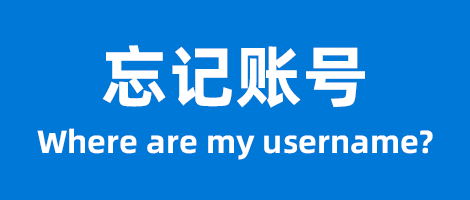
<style>
.page{position:relative;width:470px;height:200px;background:#0078d7}
.page>*{position:absolute;margin:0}
.t1{font:68px "AlibabaPuHuiTi-Bold";color:#ffffff}
.t2{font:32px "AlibabaPuHuiTi-Bold";color:#ffffff}
</style>
<div class="page">
<p class="t1" style="left:102px;top:45px;width:263px;height:63px">忘记账号</p>
<p class="t2" style="left:37px;top:128px;width:396px;height:32px">Where are my username?</p>
</div>
